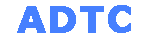
<style>
.page{position:relative;width:150px;height:38px;background:#ffffff}
.page>*{position:absolute;margin:0}
.t1{font:36px "Verdana-Bold";color:#4680ff;text-transform:uppercase;font-weight:bold}
</style>
<div class="page">
<p class="t1" style="left:17px;top:5px;width:114px;height:28px">adtc</p>
</div>
